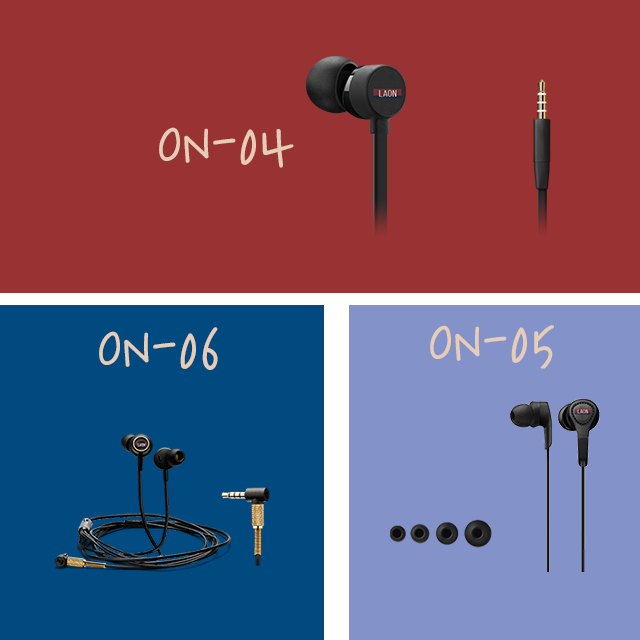
<style>
.page{position:relative;width:640px;height:640px;background:#993333}
.page>*{position:absolute;margin:0}
.t1{font:70px "SDBaikzongyulPen-bMd";color:#e7ccb7}
</style>
<div class="page">
<p class="t1" style="left:159px;top:127px;width:135px;height:41px">ON-04</p>
<p class="t1" style="left:99px;top:327px;width:119px;height:43px">ON-06</p>
<p class="t1" style="left:430px;top:325px;width:124px;height:44px">ON-05</p>
</div>
